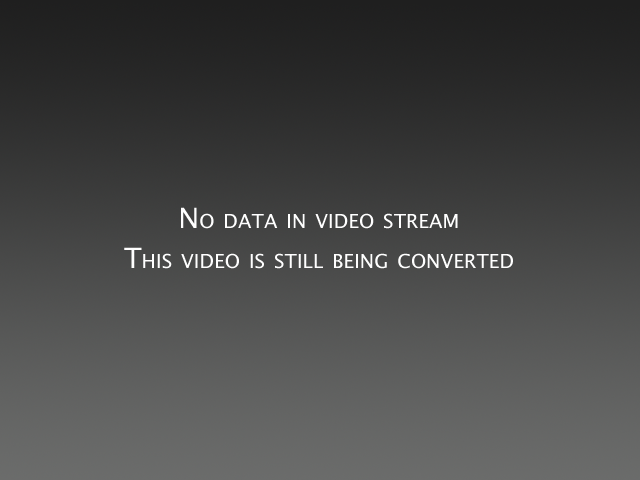
<style>
.page{position:relative;width:640px;height:480px}
.page>*{position:absolute;margin:0}
.t1{font:28px/40px "LucidaSansUnicode";color:#ffffff;font-variant:small-caps}
</style>
<div class="page">
<p class="t1" style="left:124px;top:207px;width:389px;height:62px;text-align:center">No data in video stream<br>This video is still being converted</p>
</div>
